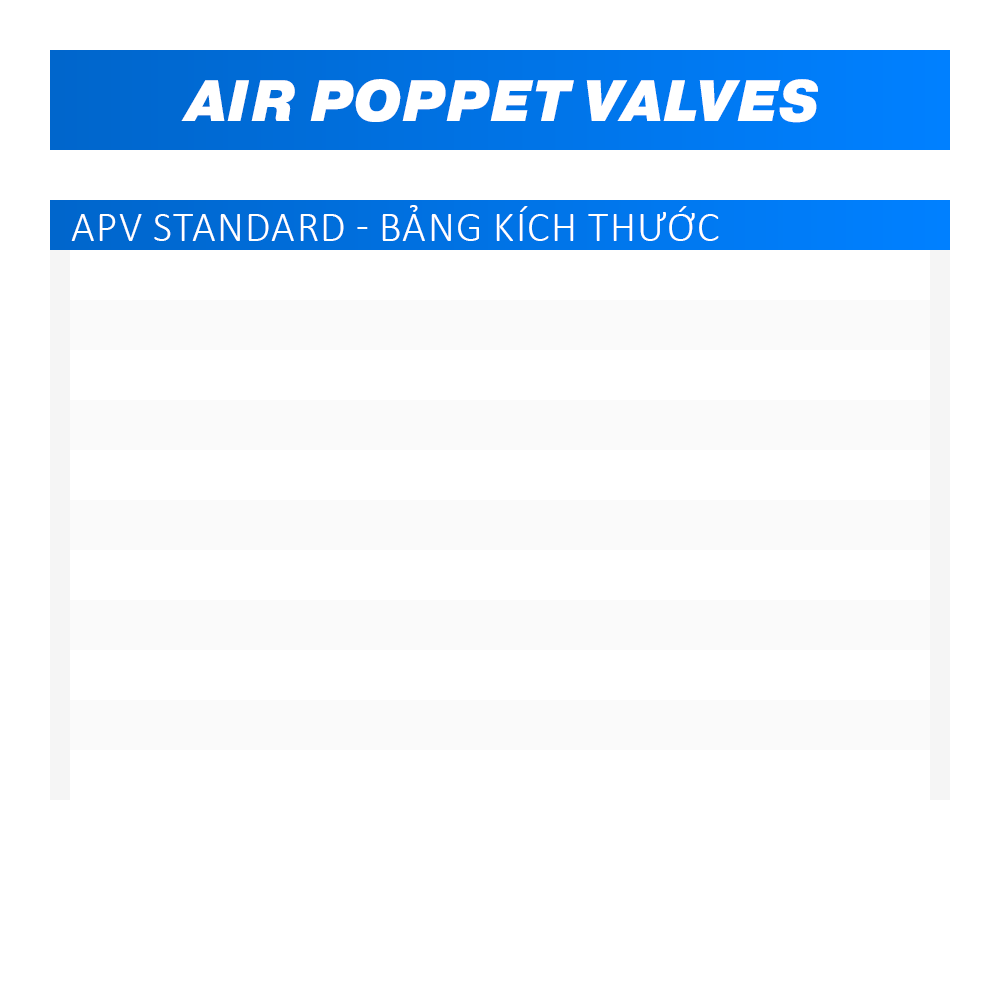
<style>
.page{position:relative;width:1000px;height:1000px;background:#ffffff}
.page>*{position:absolute;margin:0}
.t1{font:58.3px "Pragmatica-BlackOblique";color:#ffffff;text-transform:uppercase}
.t2{font:41.7px "Calibri-Light";color:#ffffff;text-transform:uppercase}
</style>
<div class="page">
<p class="t1" style="left:181px;top:79px;width:637px;height:44px">AIR POPPET VALVES</p>
<p class="t2" style="left:71px;top:205px;width:648px;height:36px">APV STANDARD - BẢNG KÍCH THƯỚC</p>
</div>
